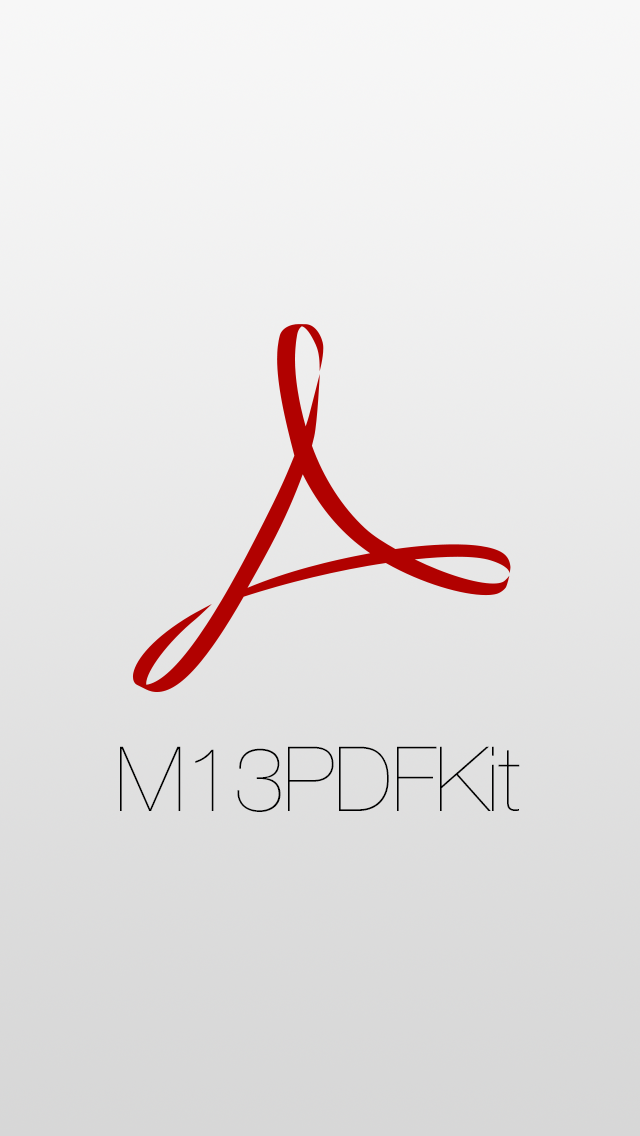
<style>
.page{position:relative;width:640px;height:1136px}
.page>*{position:absolute;margin:0}
.t1{font:90px "HelveticaNeue-UltraLight";letter-spacing:-0.007em;color:#000000}
</style>
<div class="page">
<p class="t1" style="left:120px;top:746px;width:400px;height:66px">M13PDFKit</p>
</div>
